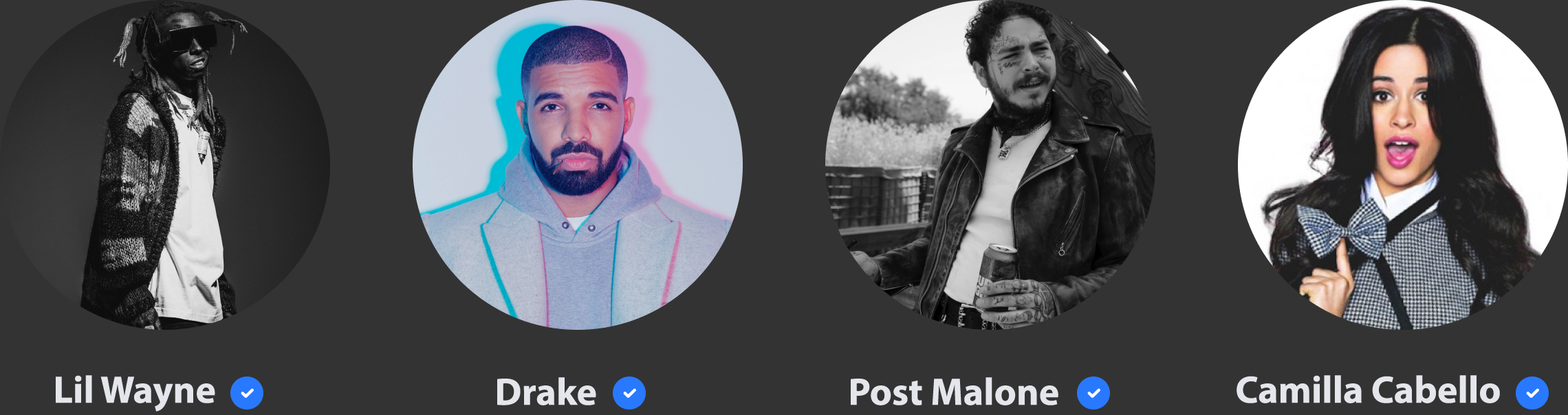
<style>
.page{position:relative;width:1568px;height:415px;background:#333333}
.page>*{position:absolute;margin:0}
.t1{font:38.5px "MyriadPro-Bold";color:#e4e6eb}
</style>
<div class="page">
<p class="t1" style="left:56px;top:375px;width:159px;height:37px">Lil Wayne</p>
<p class="t1" style="left:497px;top:378px;width:99px;height:28px">Drake</p>
<p class="t1" style="left:851px;top:378px;width:207px;height:28px">Post Malone</p>
<p class="t1" style="left:1237px;top:375px;width:263px;height:29px">Camilla Cabello</p>
</div>
